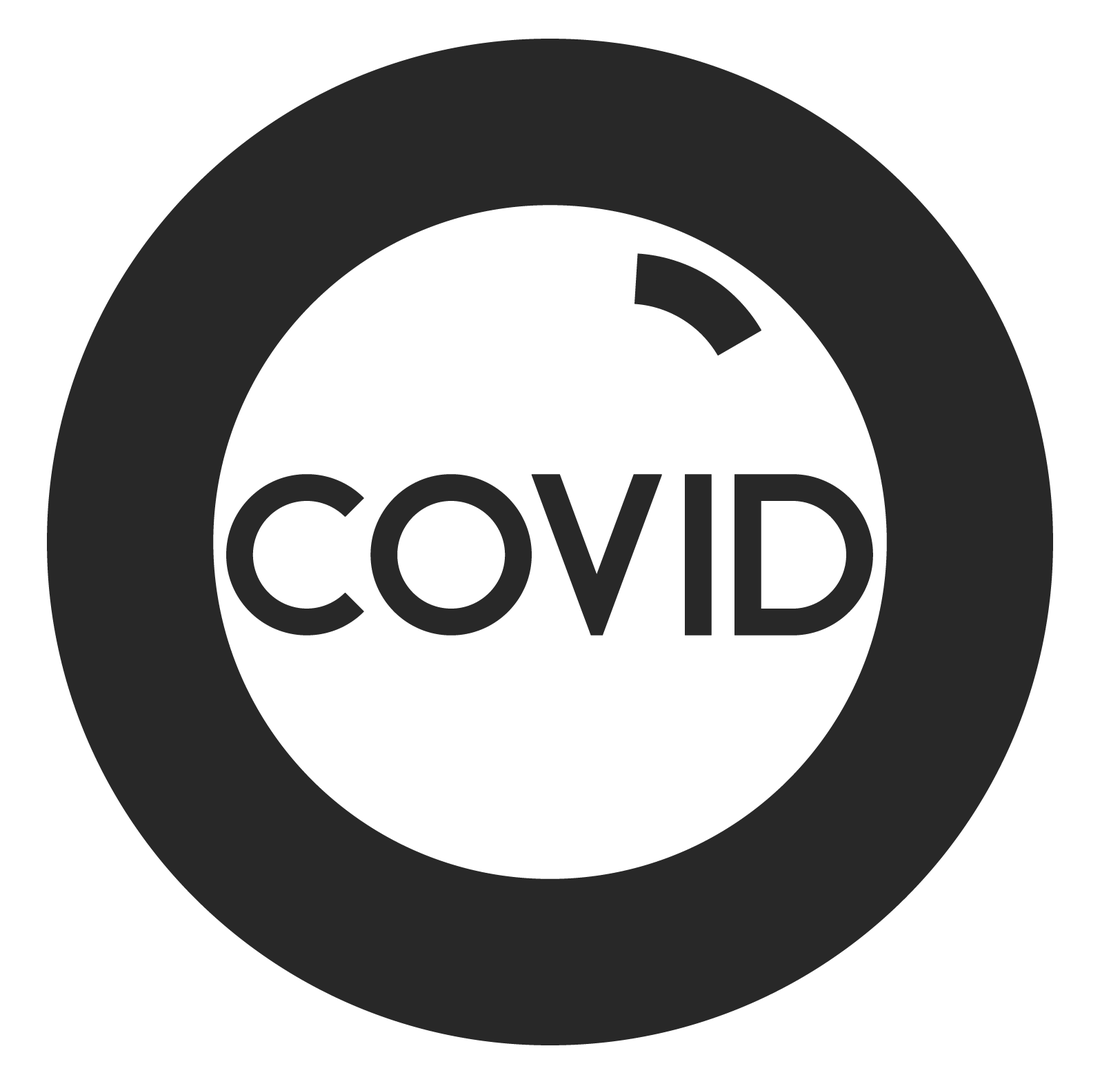
<style>
.page{position:relative;width:1100px;height:1084px;background:#ffffff}
.page>*{position:absolute;margin:0}
.t1{font:1437.2px "BronxRegular";color:#282828}
.t2{font:71.9px "BronxRegular";color:#282828;scale:10 1}
.t3{font:229.9px "BronxRegular";color:#282828}
</style>
<div class="page">
<p class="t1" style="left:47px;top:39px;width:1006px;height:1006px">o</p>
<p class="t2" style="left:635px;top:253px;width:127px;height:103px;rotate:32deg">i</p>
<p class="t3" style="left:226px;top:474px;width:647px;height:161px">covid</p>
</div>
